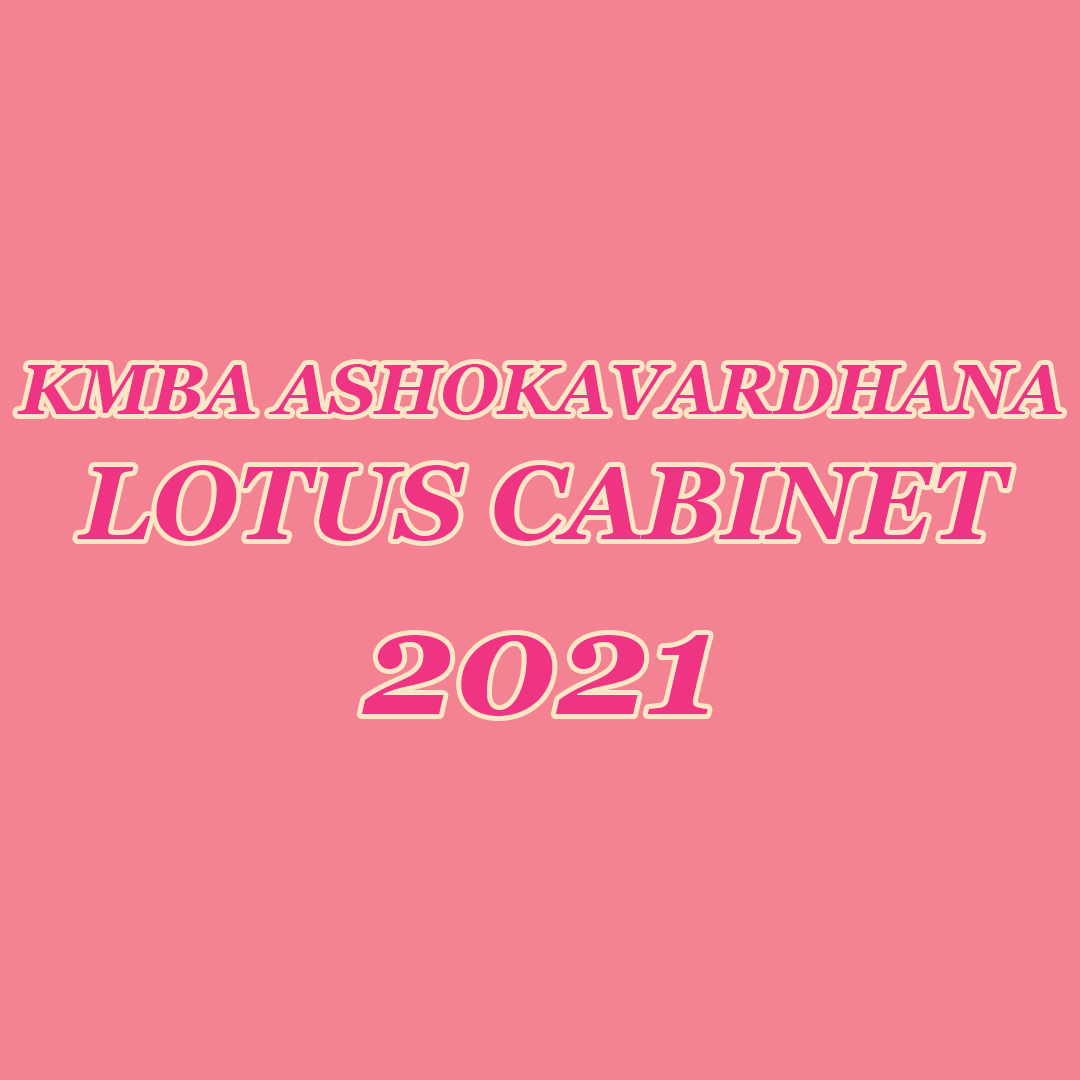
<style>
.page{position:relative;width:1080px;height:1080px;background:#f38393}
.page>*{position:absolute;margin:0}
.t1{font:70.8px "Georgia-BoldItalic";color:#ef3483}
.t2{font:104.2px "Georgia-BoldItalic";color:#ef3483}
.t3{font:145.8px "Georgia-BoldItalic";color:#ef3483}
</style>
<div class="page">
<p class="t1" style="left:17px;top:364px;width:1046px;height:352px;text-align:center">KMBA ASHOKAVARDHANA<br><span class="t2">LOTUS CABINET<br></span><span class="t3">2021</span></p>
</div>
